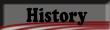
<style>
.page{position:relative;width:110px;height:30px;background:#696666}
.page>*{position:absolute;margin:0}
.t1{font:20px "CooperBlackStd";color:#000000;scale:0.75 1}
</style>
<div class="page">
<p class="t1" style="left:26px;top:7px;width:62px;height:19px">History</p>
</div>
